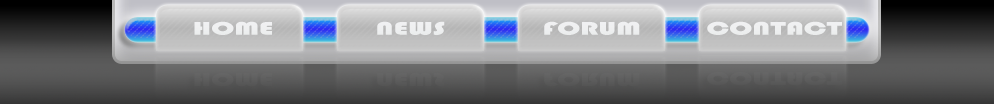
<style>
.page{position:relative;width:994px;height:104px}
.page>*{position:absolute;margin:0}
.t1{font:19px "Bauhaus93";color:#ffffff;scale:1.6 1}
</style>
<div class="page">
<p class="t1" style="left:194px;top:21px;width:78px;height:14px">HOME</p>
<p class="t1" style="left:377px;top:21px;width:68px;height:14px">NEWS</p>
<p class="t1" style="left:544px;top:21px;width:96px;height:14px">FORUM</p>
<p class="t1" style="left:707px;top:21px;width:135px;height:14px">CONTACT</p>
</div>
